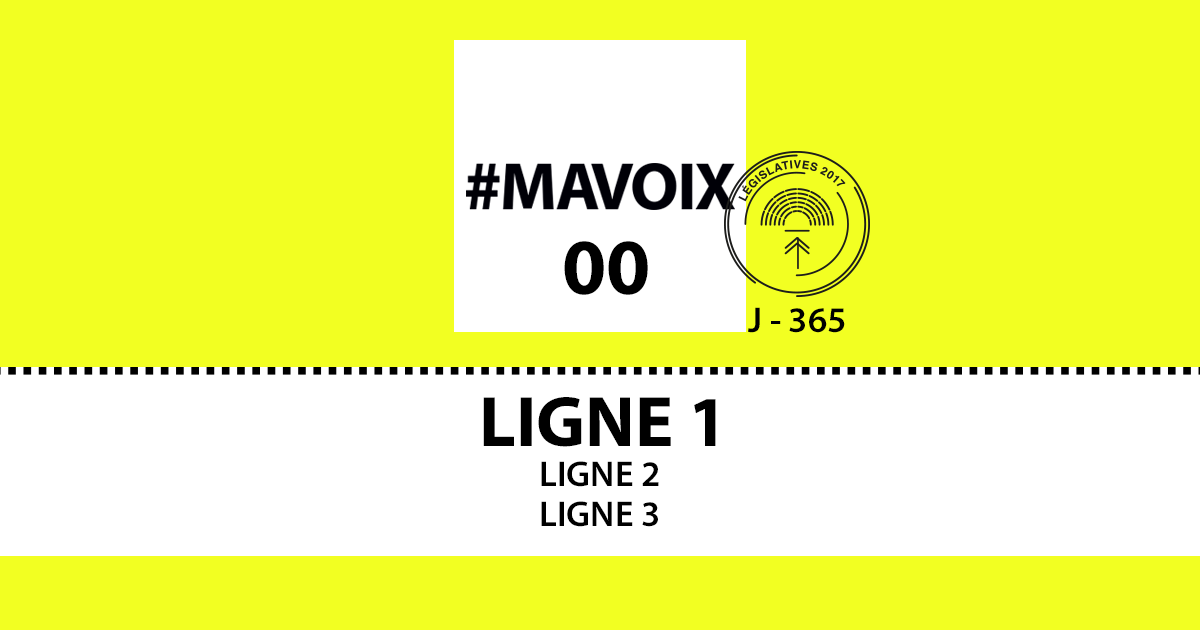
<style>
.page{position:relative;width:1200px;height:630px;background:#f2ff22}
.page>*{position:absolute;margin:0}
.t1{font:80px "MyriadPro-Bold";color:#000000}
.t2{font:36px "MyriadPro-Semibold";color:#000000}
.t3{font:72px "MyriadPro-Bold";color:#000000}
</style>
<div class="page">
<p class="t1" style="left:564px;top:241px;width:84px;height:54px">00</p>
<p class="t2" style="left:748px;top:307px;width:97px;height:26px">J - 365</p>
<p class="t3" style="left:483px;top:397px;width:233px;height:50px">LIGNE 1</p>
<p class="t2" style="left:541px;top:461px;width:118px;height:26px">LIGNE 2</p>
<p class="t2" style="left:541px;top:501px;width:117px;height:26px">LIGNE 3</p>
</div>
